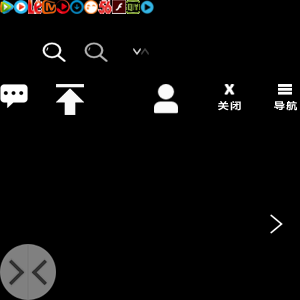
<style>
.page{position:relative;width:300px;height:300px;background:#000000}
.page>*{position:absolute;margin:0}
.t1{font:9.7px "MicrosoftYaHei-Bold";letter-spacing:0.15em;color:#ffffff;scale:1.14 1}
</style>
<div class="page">
<p class="t1" style="left:218px;top:101px;width:23px;height:10px">关闭</p>
<p class="t1" style="left:274px;top:101px;width:23px;height:10px">导航</p>
</div>
